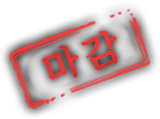
<style>
.page{position:relative;width:160px;height:119px;background:#ffffff}
.page>*{position:absolute;margin:0}
.t1{font:40.4px "SDKukdetopokki-aLt";letter-spacing:0.12em;color:#ff3535}
</style>
<div class="page">
<p class="t1" style="left:42px;top:30px;width:76px;height:50px;rotate:-20deg">마감</p>
</div>
